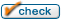
<style>
.page{position:relative;width:61px;height:20px;background:#ffffff}
.page>*{position:absolute;margin:0}
.t1{font:10.8px "ArialMT";letter-spacing:0.025em;color:#006699;scale:1.11 1}
</style>
<div class="page">
<p class="t1" style="left:18px;top:7px;width:34px;height:8px">check</p>
</div>
